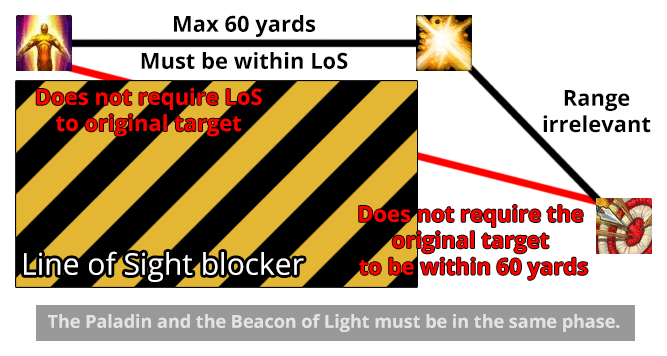
<style>
.page{position:relative;width:667px;height:356px;background:#ffffff}
.page>*{position:absolute;margin:0}
.t1{font:22px "OpenSans-Bold";color:#000000}
.t2{font:22px "OpenSans-Bold";color:#ff0000}
.t3{font:30px "OpenSans";color:#ffffff}
.t4{font:18px "OpenSans-Bold";color:#e3e3e3}
</style>
<div class="page">
<p class="t1" style="left:174px;top:15px;width:142px;height:22px">Max 60 yards</p>
<p class="t1" style="left:141px;top:52px;width:207px;height:17px">Must be within LoS</p>
<p class="t2" style="left:36px;top:88px;width:226px;height:49px;text-align:center">Does not require LoS to original target</p>
<p class="t1" style="left:543px;top:90px;width:108px;height:43px;text-align:center">Range irrelevant</p>
<p class="t2" style="left:359px;top:205px;width:229px;height:75px;text-align:center">Does not require the original target<br> to be within 60 yards</p>
<p class="t3" style="left:24px;top:251px;width:280px;height:31px">Line of Sight blocker</p>
<p class="t4" style="left:48px;top:314px;width:572px;height:18px">The Paladin and the Beacon of Light must be in the same phase.</p>
</div>
